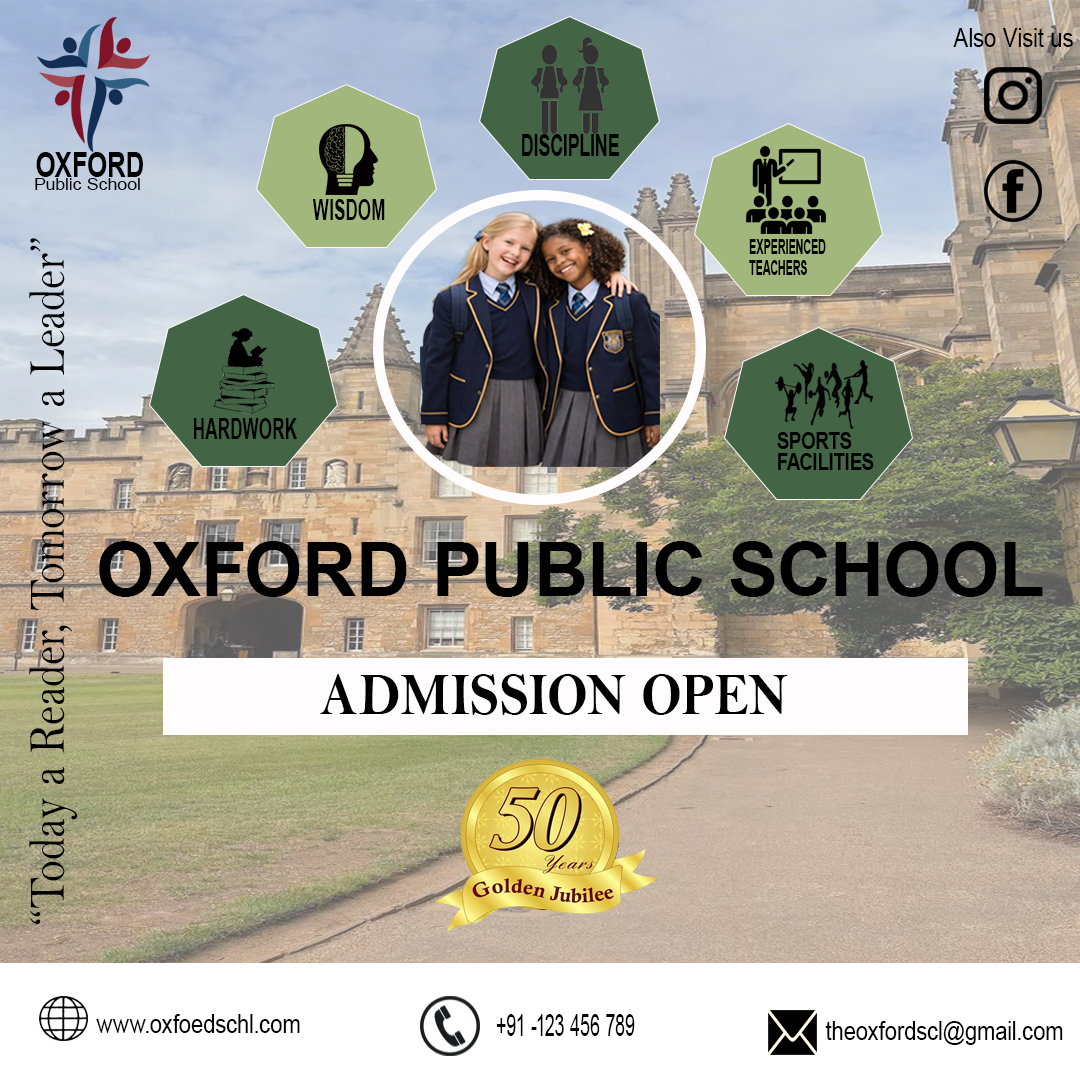
<style>
.page{position:relative;width:1080px;height:1080px}
.page>*{position:absolute;margin:0}
.t1{font:25.8px "ArialMT";letter-spacing:0.01em;color:#010101;scale:0.85 1}
.t2{font:30.6px "Arial-BoldMT";letter-spacing:0.01em;color:#000000;scale:0.59 1}
.t3{font:34.3px "Arial-BoldMT";letter-spacing:0.01em;color:#000000;scale:0.76 1}
.t4{font:16.6px "ArialMT";letter-spacing:0.01em;color:#000000;scale:1.08 1}
.t5{font:29.3px "Arial-BoldMT";letter-spacing:0.01em;color:#000000;scale:0.59 1}
.t6{font:51.6px "BellMT";letter-spacing:0.01em;color:#010101;scale:0.86 1}
.t7{font:20.9px/21.2px "Arial-BoldMT";letter-spacing:0.01em;color:#000000;scale:0.52 1}
.t8{font:23.7px/21.2px "Arial-BoldMT";letter-spacing:0.01em;color:#000000;scale:0.78 1}
.t9{font:75px "Arial-BoldMT";letter-spacing:0.01em;color:#000000}
.t10{font:60.9px "BellMTBold";letter-spacing:0.01em;color:#000000;scale:0.87 1}
.t11{font:25.8px "ArialMT";letter-spacing:0.01em;color:#000000;scale:0.85 1}
.t12{font:30.3px "ArialMT";letter-spacing:0.01em;color:#000000;scale:0.59 1}
</style>
<div class="page">
<p class="t1" style="left:953px;top:28px;width:120px;height:19px">Also Visit us</p>
<p class="t2" style="left:522px;top:134px;width:97px;height:22px">DISCIPLINE</p>
<p class="t3" style="left:36px;top:152px;width:107px;height:25px">OXFORD</p>
<p class="t4" style="left:35px;top:178px;width:105px;height:12px">Public School</p>
<p class="t5" style="left:312px;top:199px;width:73px;height:21px">WISDOM</p>
<p class="t6" style="left:29px;top:238px;width:49px;height:686px;rotate:-90deg">“Today a Reader, Tomorrow a Leader”</p>
<p class="t7" style="left:749px;top:239px;width:77px;height:36px">EXPERIENCED <br>TEACHERS</p>
<p class="t5" style="left:194px;top:418px;width:103px;height:21px">HARDWORK</p>
<p class="t8" style="left:777px;top:432px;width:97px;height:38px">SPORTS<br>FACILITIES</p>
<p class="t9" style="left:99px;top:541px;width:944px;height:56px">OXFORD PUBLIC SCHOOL</p>
<p class="t10" style="left:320px;top:674px;width:468px;height:41px">ADMISSION OPEN</p>
<p class="t11" style="left:96px;top:1014px;width:204px;height:19px">www.oxfoedschl.com</p>
<p class="t12" style="left:496px;top:1014px;width:139px;height:22px">+91 -123 456 789</p>
<p class="t11" style="left:825px;top:1021px;width:238px;height:24px">theoxfordscl@gmail.com</p>
</div>
